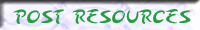
<style>
.page{position:relative;width:200px;height:30px}
.page>*{position:absolute;margin:0}
.t1{font:17px "Arabolical1";letter-spacing:-0.025em;color:#269c3f}
</style>
<div class="page">
<p class="t1" style="left:13px;top:8px;width:178px;height:16px">POST RESOURCES</p>
</div>
